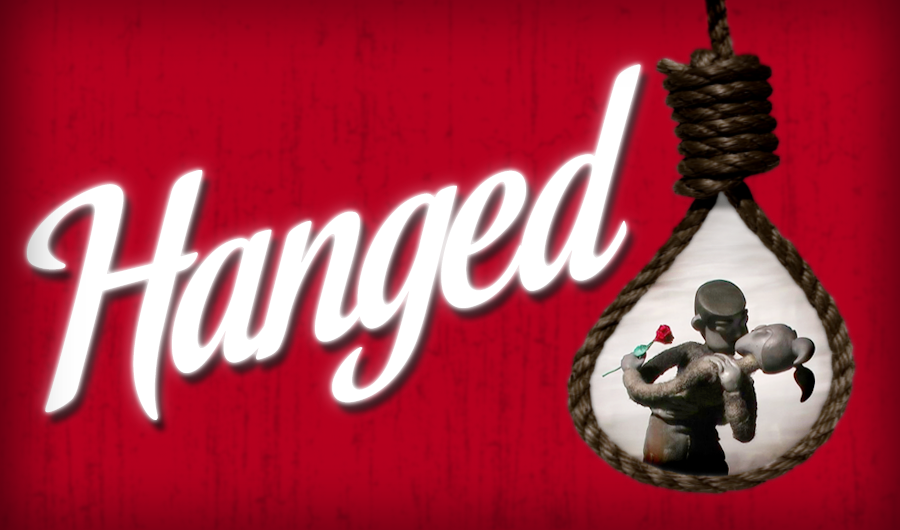
<style>
.page{position:relative;width:900px;height:530px}
.page>*{position:absolute;margin:0}
.t1{font:319px "Malbeck";letter-spacing:-0.02em;color:#ffffff;scale:0.93 1}
</style>
<div class="page">
<p class="t1" style="left:27px;top:64px;width:614px;height:356px;rotate:-14deg">Hanged</p>
</div>
